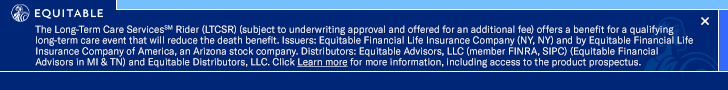
<style>
.page{position:relative;width:728px;height:90px;background:#002677}
.page>*{position:absolute;margin:0}
.t1{font:16px "GTAmerica-Rg";color:#ffffff}
.t2{font:9.8px/10.8px "GTAmerica-Rg";color:#ffffff}
.t3{font:9.8px/10.8px "GTAmerica-Rg";color:#ffffff;text-decoration:underline}
</style>
<div class="page">
<p class="t1" style="left:701px;top:17px;width:8px;height:8px">×</p>
<p class="t2" style="left:35px;top:25px;width:658px;height:43px">The Long-Term Care ServicesSM Rider (LTCSR) (subject to underwriting approval and offered for an additional fee) offers a benefit for a qualifying long-term care event that will reduce the death benefit. Issuers: Equitable Financial Life Insurance Company (NY, NY) and by Equitable Financial Life Insurance Company of America, an Arizona stock company. Distributors: Equitable Advisors, LLC (member FINRA, SIPC) (Equitable Financial Advisors in MI &amp; TN) and Equitable Distributors, LLC. Click <span class="t3">Learn more</span> for more information, including access to the product prospectus.</p>
</div>
